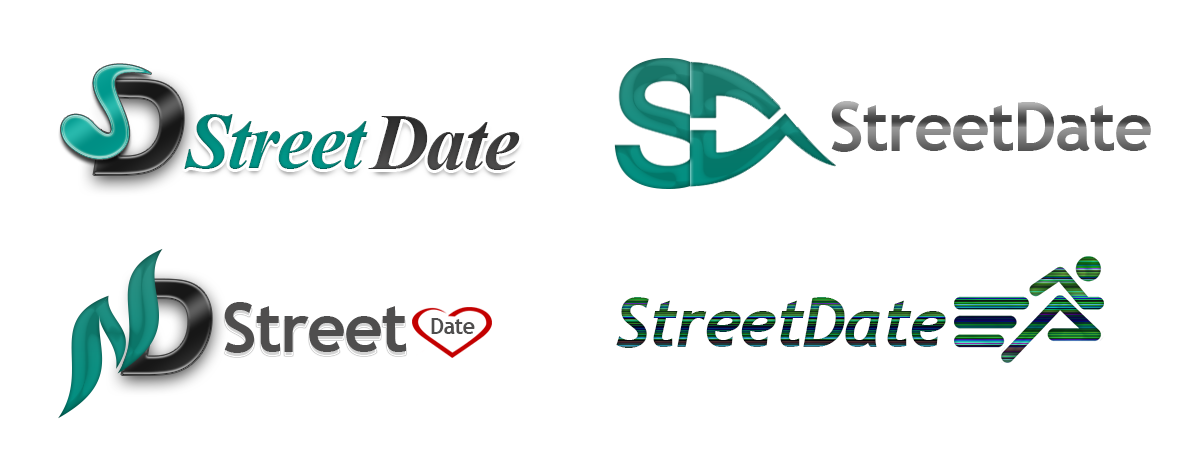
<style>
.page{position:relative;width:1200px;height:460px;background:#ffffff}
.page>*{position:absolute;margin:0}
.t1{font:68px "TrebuchetMS-Bold";letter-spacing:-0.03em}
.t2{font:80px "TimesNewRomanPS-BoldItalicMT";letter-spacing:-0.03em;color:#00897c}
.t3{font:80px "TimesNewRomanPS-BoldItalicMT";letter-spacing:-0.03em;color:#4f4e4e}
.t4{font:68px "TrebuchetMS-Bold";letter-spacing:-0.03em;color:#4f4e4e}
.t5{font:68px "Trebuchet-BoldItalic";letter-spacing:-0.03em}
.t6{font:22px "TrebuchetMS-Bold";letter-spacing:-0.03em;color:#4f4e4e}
</style>
<div class="page">
<p class="t1" style="left:831px;top:101px;width:320px;height:51px">StreetDate</p>
<p class="t2" style="left:184px;top:114px;width:184px;height:55px">Street</p>
<p class="t3" style="left:368px;top:116px;width:152px;height:54px">Date</p>
<p class="t4" style="left:224px;top:302px;width:182px;height:51px">Street</p>
<p class="t5" style="left:616px;top:297px;width:330px;height:51px">StreetDate</p>
<p class="t6" style="left:431px;top:318px;width:44px;height:16px">Date</p>
</div>
